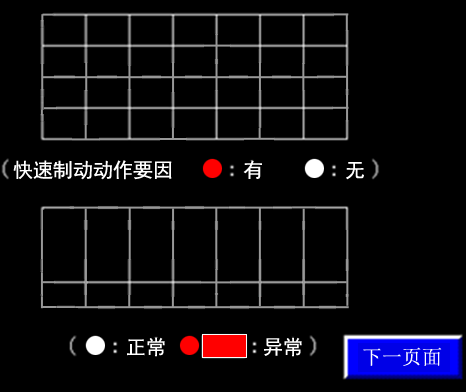
<style>
.page{position:relative;width:466px;height:392px;background:#000000}
.page>*{position:absolute;margin:0}
.t1{font:20px "SimHei";color:#ffffff}
.t2{font:20px "SimSun";color:#ffffff}
</style>
<div class="page">
<p class="t1" style="left:13px;top:160px;width:159px;height:20px">快速制动动作要因</p>
<p class="t1" style="left:243px;top:160px;width:19px;height:19px">有</p>
<p class="t1" style="left:346px;top:162px;width:18px;height:18px">无</p>
<p class="t1" style="left:127px;top:337px;width:38px;height:20px">正常</p>
<p class="t1" style="left:264px;top:337px;width:38px;height:20px">异常</p>
<p class="t2" style="left:363px;top:347px;width:79px;height:19px">下一页面</p>
</div>
